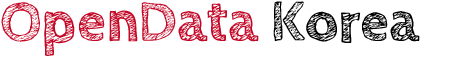
<style>
.page{position:relative;width:470px;height:60px;background:#ffffff}
.page>*{position:absolute;margin:0}
.t1{font:59px "CabinSketch-Bold";color:#c40827}
.t2{font:59px "CabinSketch-Bold";color:#000000}
</style>
<div class="page">
<p class="t1" style="left:1px;top:1px;width:419px;height:55px">OpenData <span class="t2">Korea</span></p>
</div>
